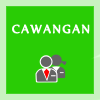
<style>
.page{position:relative;width:100px;height:100px;background:#29cc05}
.page>*{position:absolute;margin:0}
.t1{font:14px "Nyala-Regular";letter-spacing:0.075em;color:#ffffff;font-weight:bold}
</style>
<div class="page">
<p class="t1" style="left:12px;top:24px;width:78px;height:10px">CAWANGAN</p>
</div>
